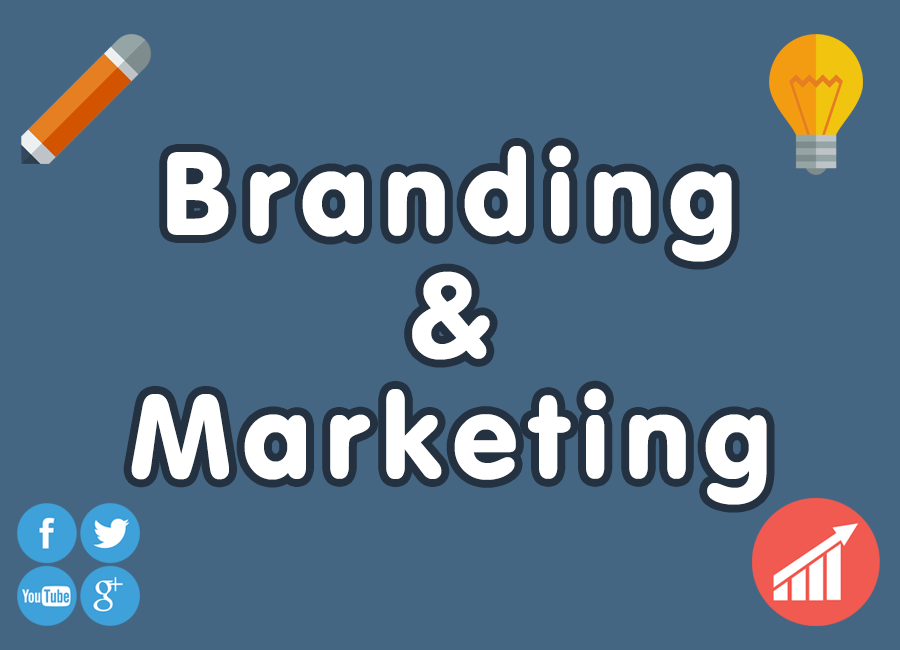
<style>
.page{position:relative;width:900px;height:650px;background:#456682}
.page>*{position:absolute;margin:0}
.t1{font:116.7px "VAGRoundedBT-Regular";letter-spacing:0.1em;color:#ffffff}
</style>
<div class="page">
<p class="t1" style="left:167px;top:145px;width:565px;height:117px">Branding</p>
<p class="t1" style="left:412px;top:271px;width:78px;height:89px">&amp;</p>
<p class="t1" style="left:131px;top:388px;width:636px;height:117px">Marketing</p>
</div>
